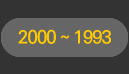
<style>
.page{position:relative;width:129px;height:74px;background:#333333}
.page>*{position:absolute;margin:0}
.t1{font:18px "KoPubDotumBold";letter-spacing:-0.04em}
.t2{font:18px "KoPubDotumBold";letter-spacing:-0.04em;color:#ffcb00}
</style>
<div class="page">
<p class="t1" style="left:18px;top:29px;width:91px;height:15px">2016 ~ 2011</p>
<p class="t2" style="left:18px;top:29px;width:94px;height:15px">2010 ~ 2006</p>
<p class="t2" style="left:18px;top:29px;width:91px;height:15px">2005 ~ 2001</p>
<p class="t2" style="left:18px;top:29px;width:93px;height:15px">2000 ~ 1993</p>
</div>
